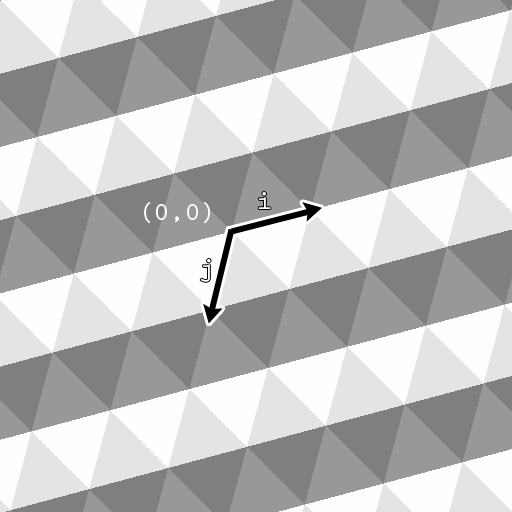
<style>
.page{position:relative;width:512px;height:512px;background:#989898}
.page>*{position:absolute;margin:0}
.t1{font:26px "PrestigeEliteStd-Bd";color:#ffffff}
</style>
<div class="page">
<p class="t1" style="left:258px;top:192px;width:13px;height:17px">i</p>
<p class="t1" style="left:144px;top:201px;width:66px;height:23px">(0,0)</p>
</div>
